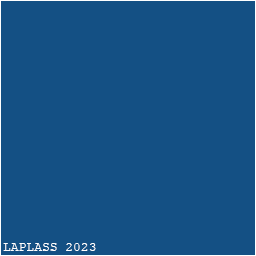
<style>
.page{position:relative;width:256px;height:256px;background:#145084}
.page>*{position:absolute;margin:0}
.t1{font:13px "CourierNewPSMT";color:#ffffff}
</style>
<div class="page">
<p class="t1" style="left:3px;top:243px;width:93px;height:8px">LAPLASS 2023</p>
</div>
